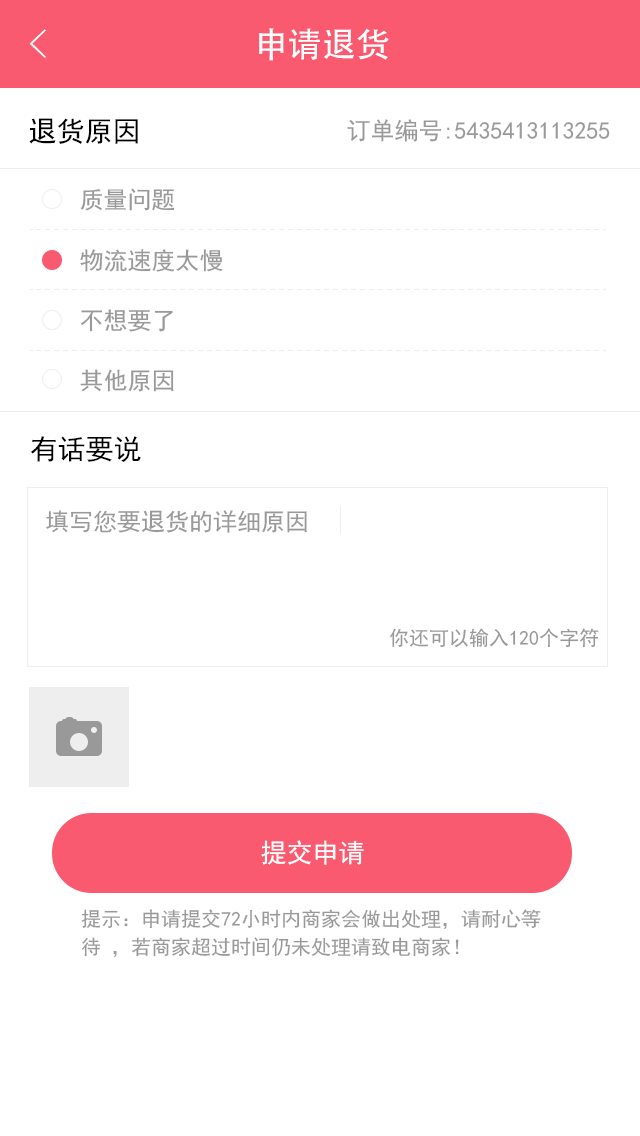
<style>
.page{position:relative;width:640px;height:1136px;background:#ffffff}
.page>*{position:absolute;margin:0}
.t1{font:40px "FZYXJW--GB1-0";color:#ffffff}
.t2{font:34px "AdobeHeitiStd-Regular";color:#ffffff}
.t3{font:28px "SimHei";color:#000000}
.t4{font:24px "SimHei";color:#999999}
.t5{font:20px "SimHei";color:#999999}
.t6{font:26px "SimHei";color:#ffffff}
.t7{font:20px/28px "SimHei";color:#999999}
</style>
<div class="page">
<p class="t1" style="left:29px;top:29px;width:17px;height:29px">&lt;</p>
<p class="t2" style="left:259px;top:28px;width:130px;height:33px">申请退货</p>
<p class="t3" style="left:29px;top:118px;width:109px;height:26px">退货原因</p>
<p class="t4" style="left:347px;top:119px;width:263px;height:23px">订单编号:5435413113255</p>
<p class="t4" style="left:80px;top:188px;width:95px;height:23px">质量问题</p>
<p class="t4" style="left:80px;top:249px;width:143px;height:23px">物流速度太慢</p>
<p class="t4" style="left:81px;top:309px;width:92px;height:23px">不想要了</p>
<p class="t4" style="left:80px;top:369px;width:94px;height:23px">其他原因</p>
<p class="t3" style="left:30px;top:436px;width:111px;height:26px">有话要说</p>
<p class="t4" style="left:46px;top:510px;width:261px;height:23px">填写您要退货的详细原因</p>
<p class="t5" style="left:389px;top:628px;width:210px;height:20px">你还可以输入120个字符</p>
<p class="t6" style="left:261px;top:840px;width:103px;height:25px">提交申请</p>
<p class="t7" style="left:81px;top:909px;width:460px;height:48px">提示：申请提交72小时内商家会做出处理，请耐心等<br>待 ，若商家超过时间仍未处理请致电商家！</p>
</div>
